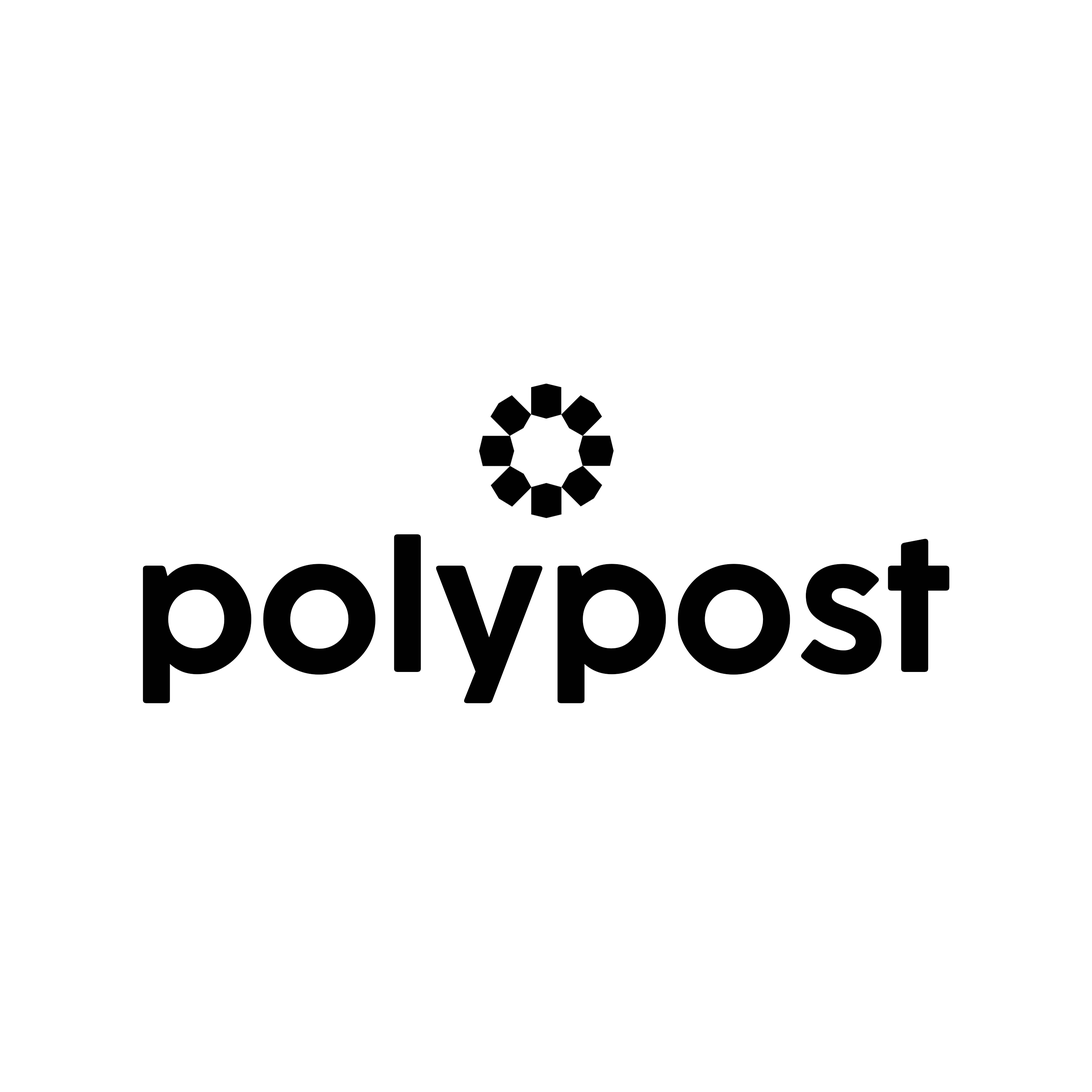
<style>
.page{position:relative;width:1092px;height:1092px;background:#ffffff}
.page>*{position:absolute;margin:0}
.t1{font:163.8px "CocogooseProTrial-Darkmode";color:#010101}
</style>
<div class="page">
<p class="t1" style="left:143px;top:534px;width:807px;height:169px">polypost</p>
</div>
